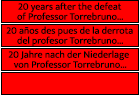
<style>
.page{position:relative;width:140px;height:96px;background:#ff0000}
.page>*{position:absolute;margin:0}
.t1{font:10px/10px "MuktaVaani-Regular";color:#000000}
</style>
<div class="page">
<p class="t1" style="left:6px;top:2px;width:127px;height:66px;text-align:center">20 years after the defeat<br>of Professor Torrebruno...<br>20 años des pues de la derrota<br>del profesor Torrebruno...<br>20 Jahre nach der Niederlage <br>von Professor Torrebruno...</p>
</div>
